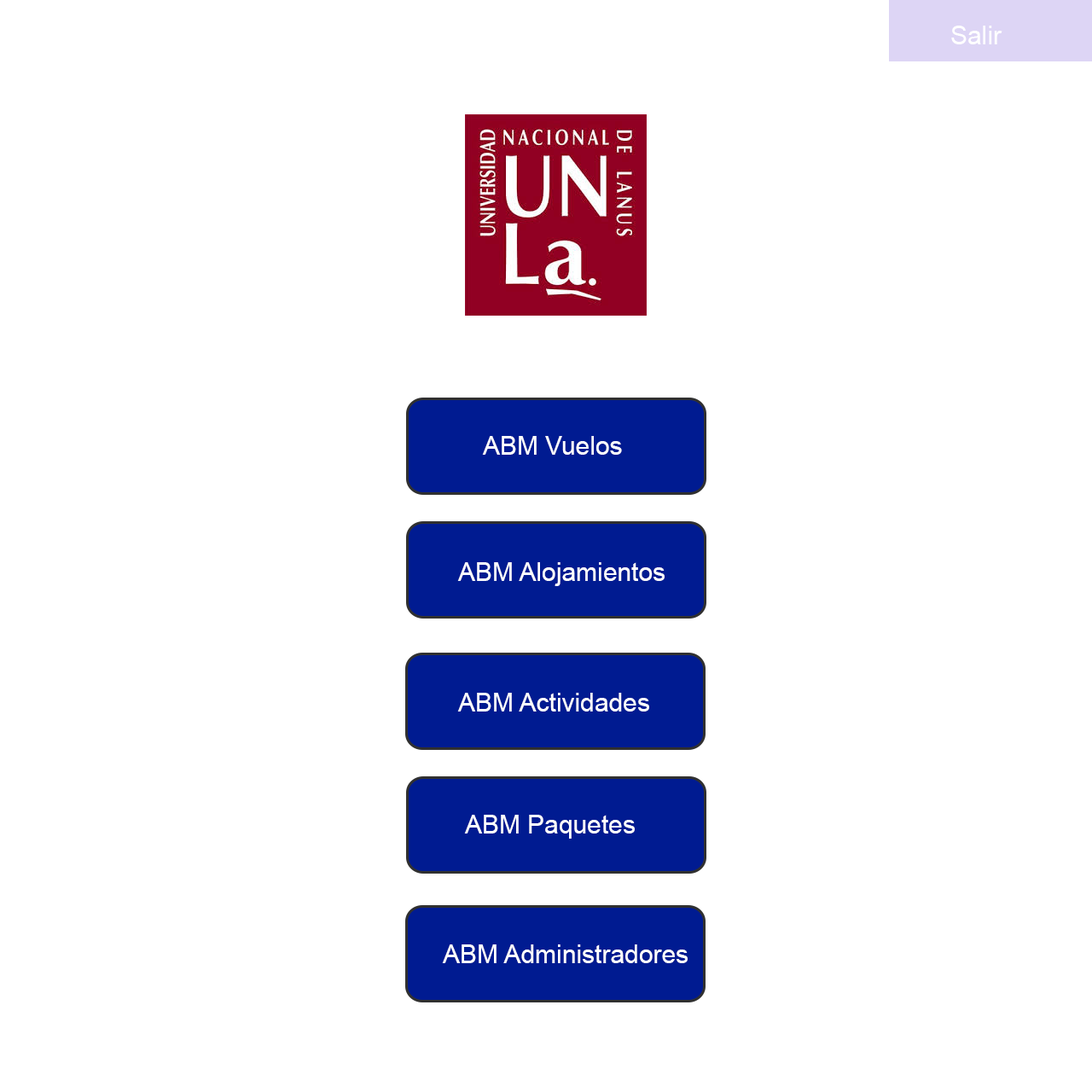
<style>
.page{position:relative;width:1092px;height:1092px;background:#ffffff}
.page>*{position:absolute;margin:0}
.t1{font:25.6px "ArialMT";color:#ffffff}
</style>
<div class="page">
<p class="t1" style="left:951px;top:26px;width:51px;height:18px">Salir</p>
<p class="t1" style="left:482px;top:436px;width:140px;height:19px">ABM Vuelos</p>
<p class="t1" style="left:457px;top:562px;width:208px;height:24px">ABM Alojamientos</p>
<p class="t1" style="left:457px;top:693px;width:192px;height:18px">ABM Actividades</p>
<p class="t1" style="left:464px;top:815px;width:171px;height:24px">ABM Paquetes</p>
<p class="t1" style="left:442px;top:944px;width:246px;height:19px">ABM Administradores</p>
</div>
